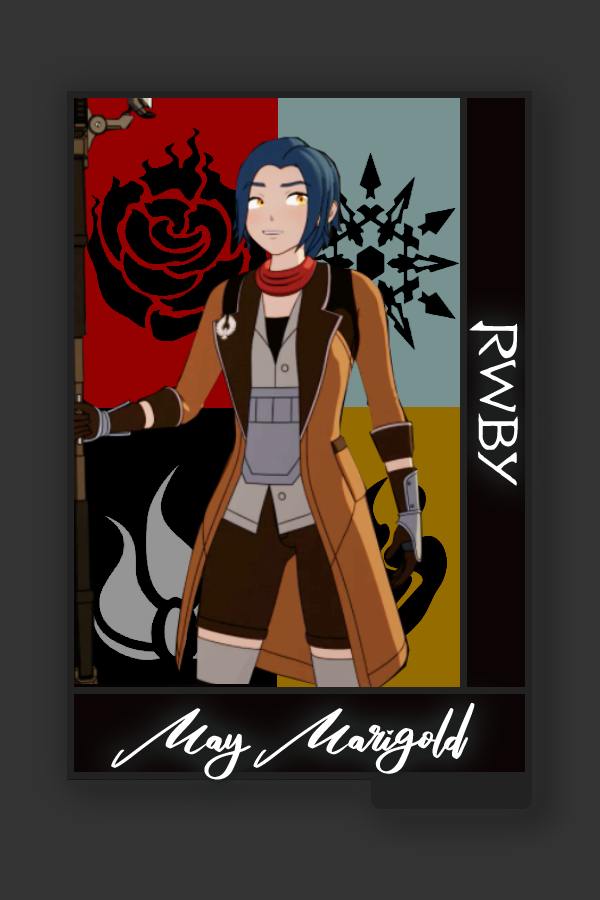
<style>
.page{position:relative;width:600px;height:900px;background:#333333}
.page>*{position:absolute;margin:0}
.t1{font:61.3px "RWBY_Style";color:#ffffff;scale:1.25 1}
.t2{font:75px "RosegaFREE";color:#ffffff}
</style>
<div class="page">
<p class="t1" style="left:469px;top:320px;width:49px;height:166px;rotate:90deg">RWBY</p>
<p class="t2" style="left:111px;top:702px;width:364px;height:83px">May Marigold</p>
</div>
